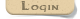
<style>
.page{position:relative;width:80px;height:19px}
.page>*{position:absolute;margin:0}
.t1{font:11.1px "KeltCapsFreehand";letter-spacing:0.1em;color:#83765b;scale:1.21 1}
</style>
<div class="page">
<p class="t1" style="left:21px;top:1px;width:38px;height:11px">Login</p>
</div>
